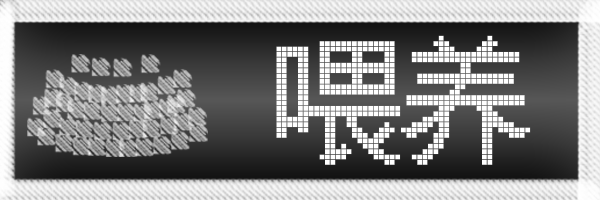
<style>
.page{position:relative;width:600px;height:200px}
.page>*{position:absolute;margin:0}
.t1{font:129.6px "FZXS24--GB1-0";color:#ffffff}
</style>
<div class="page">
<p class="t1" style="left:276px;top:35px;width:255px;height:130px">喂养</p>
</div>
